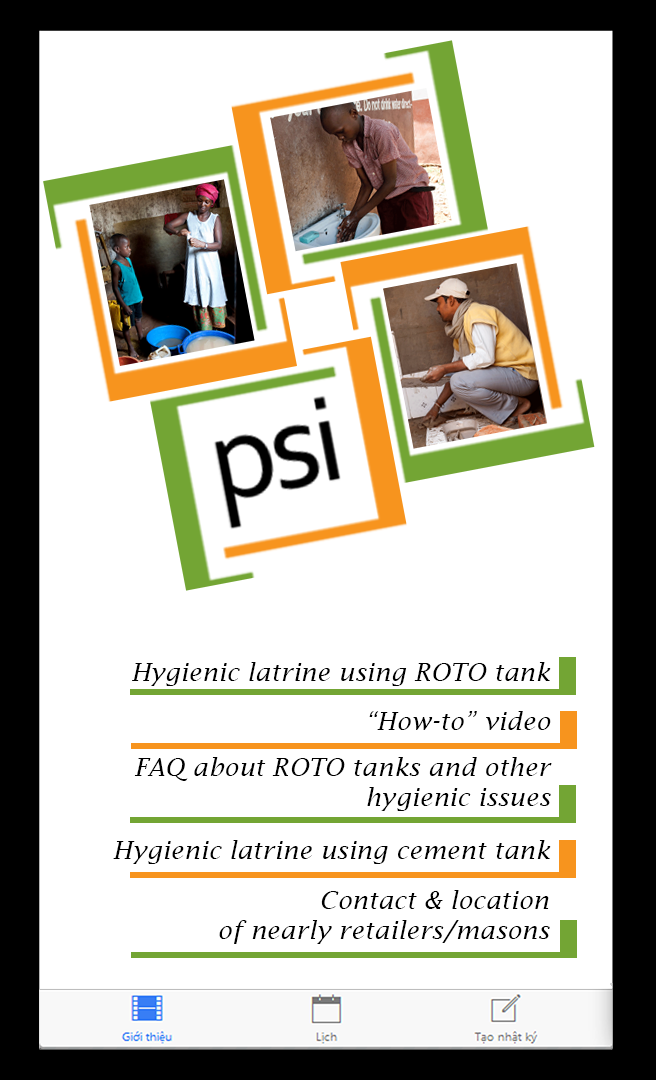
<style>
.page{position:relative;width:656px;height:1080px;background:#ffffff}
.page>*{position:absolute;margin:0}
.t1{font:25px "LucidaFax-Italic";color:#000000}
</style>
<div class="page">
<p class="t1" style="left:132px;top:662px;width:419px;height:24px">Hygienic latrine using ROTO tank</p>
<p class="t1" style="left:369px;top:711px;width:182px;height:19px">“How-to” video</p>
<p class="t1" style="left:134px;top:757px;width:418px;height:54px;text-align:right">FAQ about ROTO tanks and other hygienic issues</p>
<p class="t1" style="left:113px;top:840px;width:438px;height:24px">Hygienic latrine using cement tank</p>
<p class="t1" style="left:219px;top:890px;width:331px;height:54px;text-align:right">Contact &amp; location <br>of nearly retailers/masons</p>
</div>
